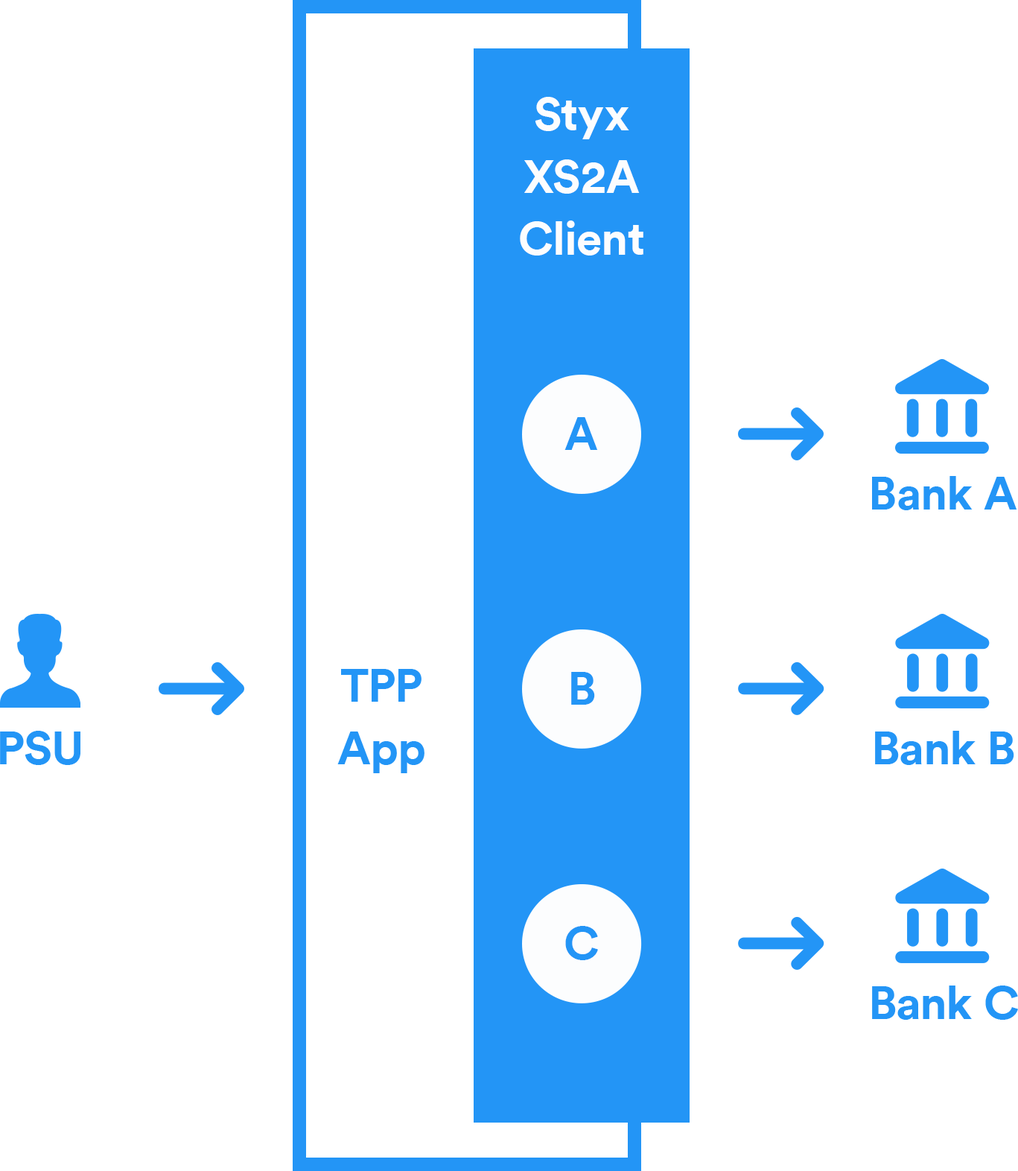
<style>
.page{position:relative;width:1018px;height:1171px;background:#ffffff}
.page>*{position:absolute;margin:0}
.t1{font:46.6px/62.1px "CircularProTT-Bold";color:#fcfdfe}
.t2{font:46.6px "CircularProTT-Bold";color:#2395f6}
.t3{font:46.6px/62.1px "CircularProTT-Bold";color:#2395f6}
.t4{font:46.5px "CircularProTT-Bold";color:#2395f6}
</style>
<div class="page">
<p class="t1" style="left:520px;top:97px;width:124px;height:159px;text-align:center">Styx XS2A Client</p>
<p class="t2" style="left:565px;top:417px;width:33px;height:33px">A</p>
<p class="t2" style="left:872px;top:476px;width:146px;height:34px">Bank A</p>
<p class="t3" style="left:337px;top:669px;width:88px;height:104px;text-align:center">TPP<br>App</p>
<p class="t4" style="left:571px;top:672px;width:24px;height:33px">B</p>
<p class="t4" style="left:0px;top:731px;width:80px;height:34px">PSU</p>
<p class="t4" style="left:875px;top:731px;width:140px;height:34px">Bank B</p>
<p class="t4" style="left:565px;top:926px;width:33px;height:34px">C</p>
<p class="t4" style="left:872px;top:986px;width:146px;height:34px">Bank C</p>
</div>
